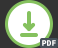
<style>
.page{position:relative;width:58px;height:48px;background:#ffffff}
.page>*{position:absolute;margin:0}
.t1{font:8px "FiraMono-Bold";color:#ffffff}
</style>
<div class="page">
<p class="t1" style="left:42px;top:40px;width:14px;height:6px">PDF</p>
</div>
